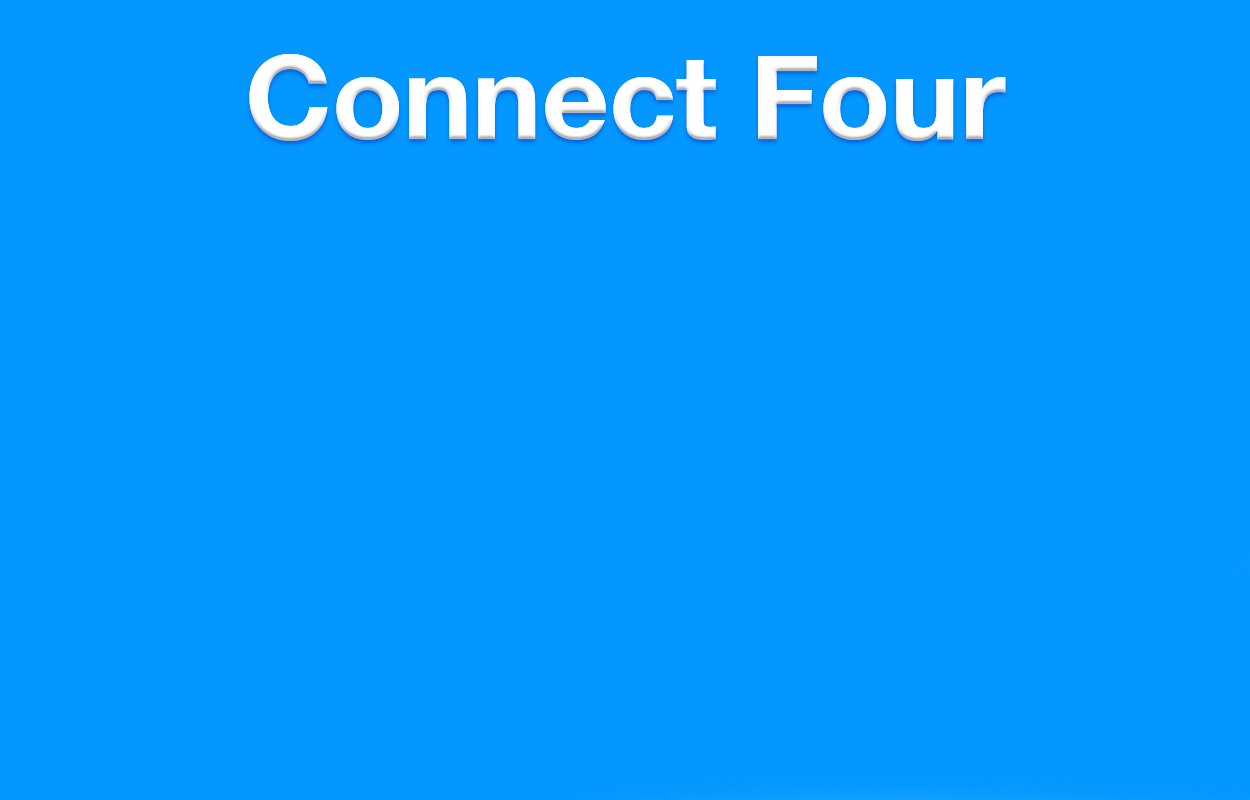
<style>
.page{position:relative;width:1250px;height:800px;background:#0397ff}
.page>*{position:absolute;margin:0}
.t1{font:116.9px "HelveticaNeue-Bold";color:#ffffff}
</style>
<div class="page">
<p class="t1" style="left:249px;top:54px;width:757px;height:87px">Connect Four</p>
</div>
